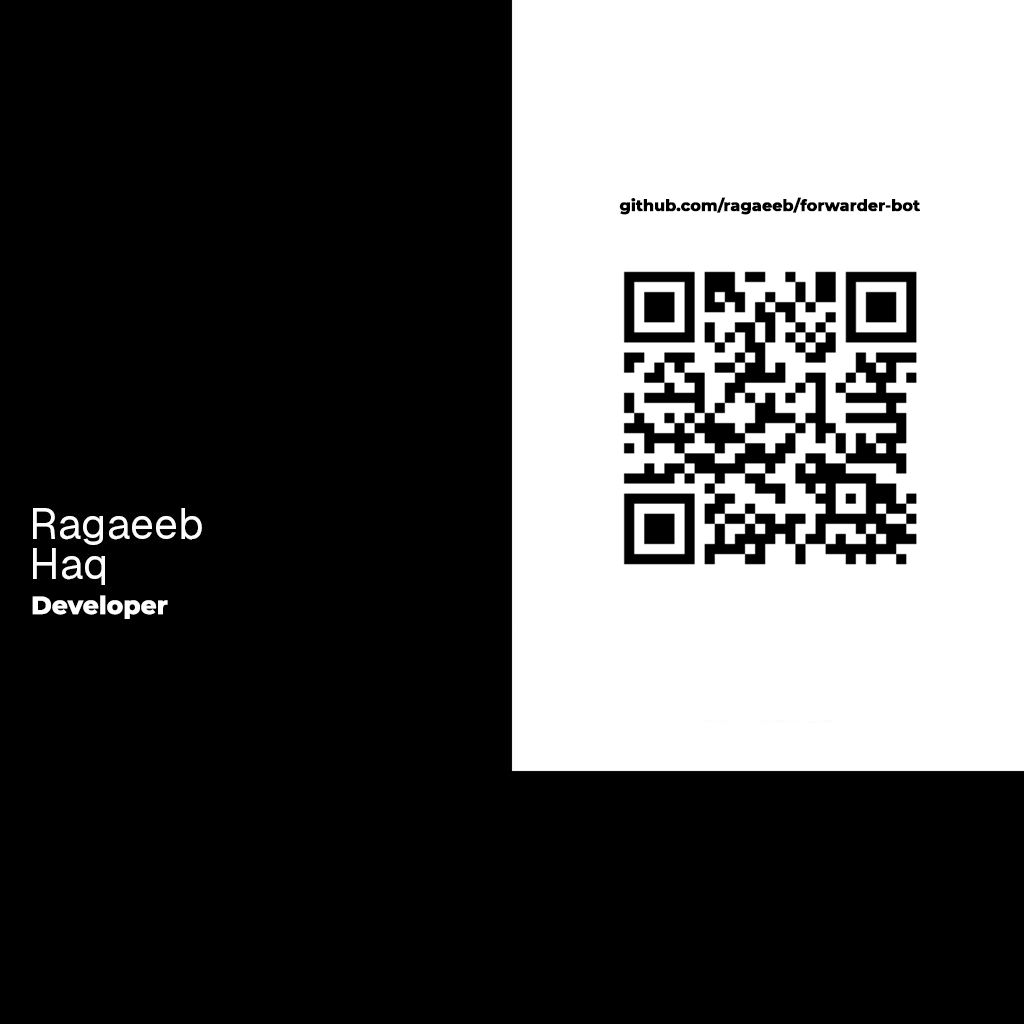
<style>
.page{position:relative;width:1024px;height:1024px;background:#000000}
.page>*{position:absolute;margin:0}
.t1{font:16px "Montserrat-ExtraBold";color:#000000}
.t2{font:25px "Montserrat-ExtraBold";color:#ffffff}
</style>
<div class="page">
<p class="t1" style="left:619px;top:197px;width:301px;height:18px">github.com/ragaeeb/forwarder-bot</p>
<p class="t2" style="left:32px;top:595px;width:136px;height:24px">Developer</p>
</div>
